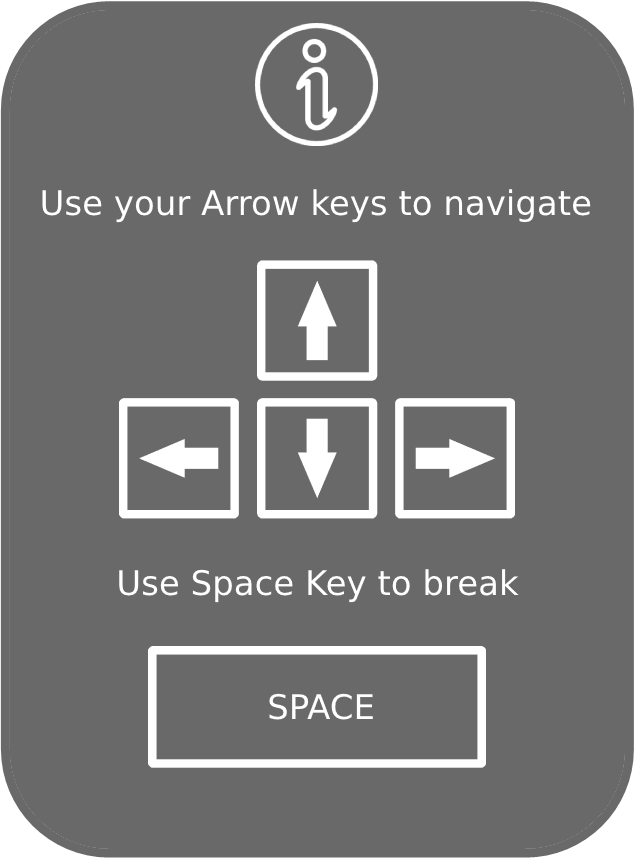
<style>
.page{position:relative;width:634px;height:858px;background:#696969}
.page>*{position:absolute;margin:0}
.t1{font:34px "DejaVuSans";color:#ffffff}
</style>
<div class="page">
<p class="t1" style="left:42px;top:189px;width:549px;height:34px">Use your Arrow keys to navigate</p>
<p class="t1" style="left:119px;top:569px;width:400px;height:34px">Use Space Key to break</p>
<p class="t1" style="left:269px;top:693px;width:104px;height:27px">SPACE</p>
</div>
